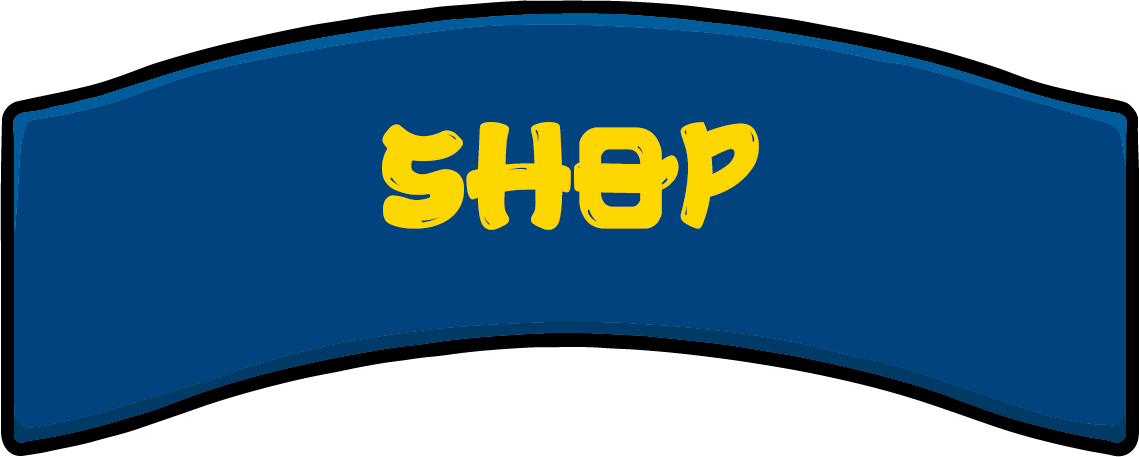
<style>
.page{position:relative;width:1139px;height:457px;background:#00437f}
.page>*{position:absolute;margin:0}
.t1{font:150px "SamuraiBlastRegular";color:#ffd700}
</style>
<div class="page">
<p class="t1" style="left:382px;top:122px;width:377px;height:108px">Shop</p>
</div>
